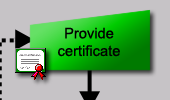
<style>
.page{position:relative;width:170px;height:100px;background:#c6c3c6}
.page>*{position:absolute;margin:0}
.t1{font:14.7px "ArialMT";color:#000000}
</style>
<div class="page">
<p class="t1" style="left:58px;top:27px;width:62px;height:30px;text-align:center">Provide<br>certificate</p>
</div>
